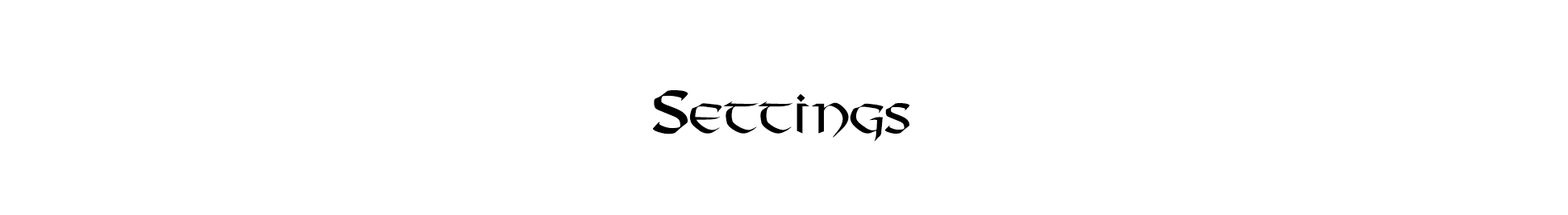
<style>
.page{position:relative;width:1568px;height:215px;background:#ffffff}
.page>*{position:absolute;margin:0}
.t1{font:58px "Viking-Medium";color:#000000;font-variant:small-caps}
</style>
<div class="page">
<p class="t1" style="left:653px;top:90px;width:257px;height:52px">Settings</p>
</div>
